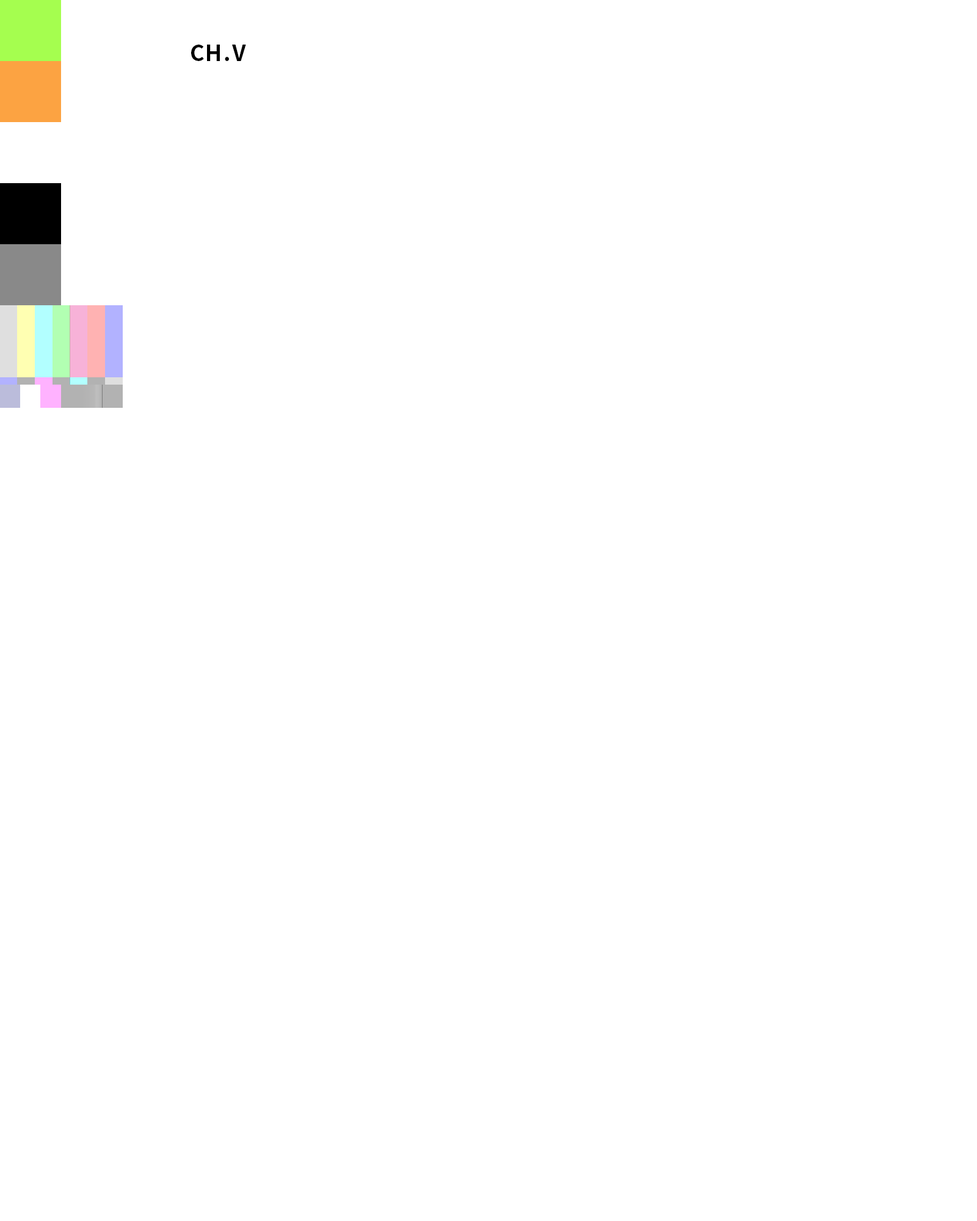
<style>
.page{position:relative;width:977px;height:1221px;background:#ffffff}
.page>*{position:absolute;margin:0}
.t1{font:22px "NotoSansKR-Bold";letter-spacing:0.06em;color:#000000}
</style>
<div class="page">
<p class="t1" style="left:191px;top:45px;width:55px;height:16px">CH.V</p>
</div>
